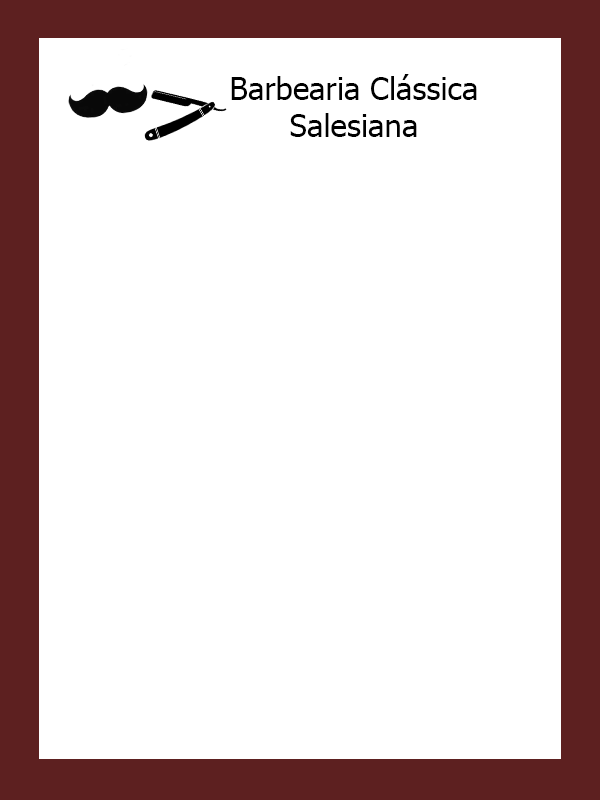
<style>
.page{position:relative;width:600px;height:800px;background:#ffffff}
.page>*{position:absolute;margin:0}
.t1{font:31.2px "Tahoma";color:#000000}
</style>
<div class="page">
<p class="t1" style="left:231px;top:74px;width:246px;height:63px;text-align:center">Barbearia Clássica Salesiana</p>
</div>
